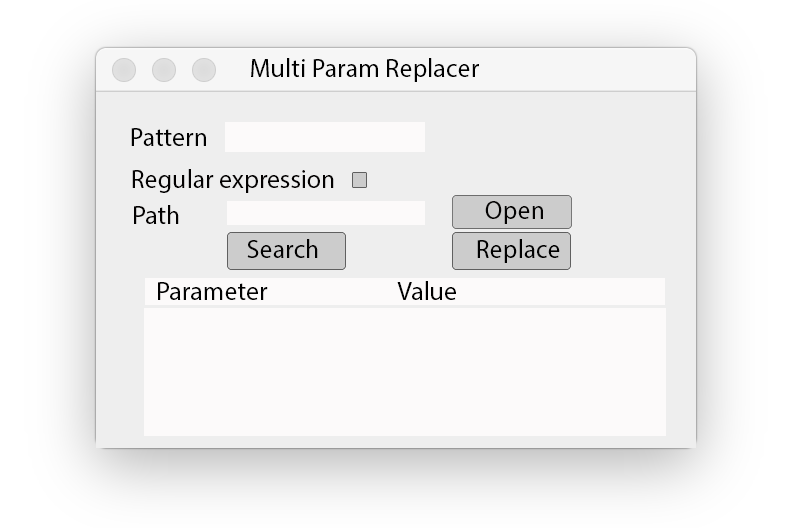
<style>
.page{position:relative;width:804px;height:528px;background:#eeeeee}
.page>*{position:absolute;margin:0}
.t1{font:26px "MyriadPro-Regular";color:#000000}
.t2{font:26px "MyriadPro-Regular";color:#030101}
.t3{font:26px "MyriadPro-Regular";color:#030202}
.t4{font:26px "MyriadPro-Regular";color:#010101}
</style>
<div class="page">
<p class="t1" style="left:251px;top:58px;width:228px;height:24px">Multi Param Replacer</p>
<p class="t1" style="left:131px;top:128px;width:75px;height:18px">Pattern</p>
<p class="t2" style="left:132px;top:169px;width:202px;height:24px">Regular expression</p>
<p class="t2" style="left:134px;top:205px;width:45px;height:19px">Path</p>
<p class="t3" style="left:485px;top:201px;width:58px;height:23px">Open</p>
<p class="t3" style="left:247px;top:239px;width:71px;height:19px">Search</p>
<p class="t1" style="left:477px;top:239px;width:83px;height:24px">Replace</p>
<p class="t1" style="left:397px;top:281px;width:59px;height:19px">Value</p>
<p class="t4" style="left:158px;top:282px;width:110px;height:18px">Parameter</p>
</div>
